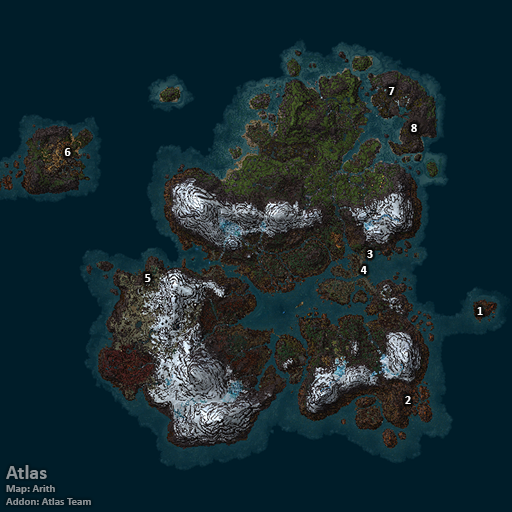
<style>
.page{position:relative;width:512px;height:512px;background:#001d29}
.page>*{position:absolute;margin:0}
.t1{font:12px "Calibri-Bold";color:#ffffff}
.t2{font:11px "Calibri-Bold";color:#8d9397}
.t3{font:20px "Calibri-Bold";color:#8d9397}
</style>
<div class="page">
<p class="t1" style="left:388px;top:87px;width:7px;height:8px">7</p>
<p class="t1" style="left:411px;top:124px;width:6px;height:8px">8</p>
<p class="t1" style="left:64px;top:148px;width:7px;height:8px">6</p>
<p class="t1" style="left:367px;top:250px;width:6px;height:8px">3</p>
<p class="t1" style="left:360px;top:266px;width:7px;height:8px">4</p>
<p class="t1" style="left:145px;top:274px;width:6px;height:8px">5</p>
<p class="t1" style="left:477px;top:307px;width:6px;height:8px">1</p>
<p class="t1" style="left:405px;top:396px;width:6px;height:8px">2</p>
<p class="t2" style="left:6px;top:465px;width:85px;height:40px"><span class="t3">Atlas<br></span>Map: Arith<br>Addon: Atlas Team</p>
</div>
